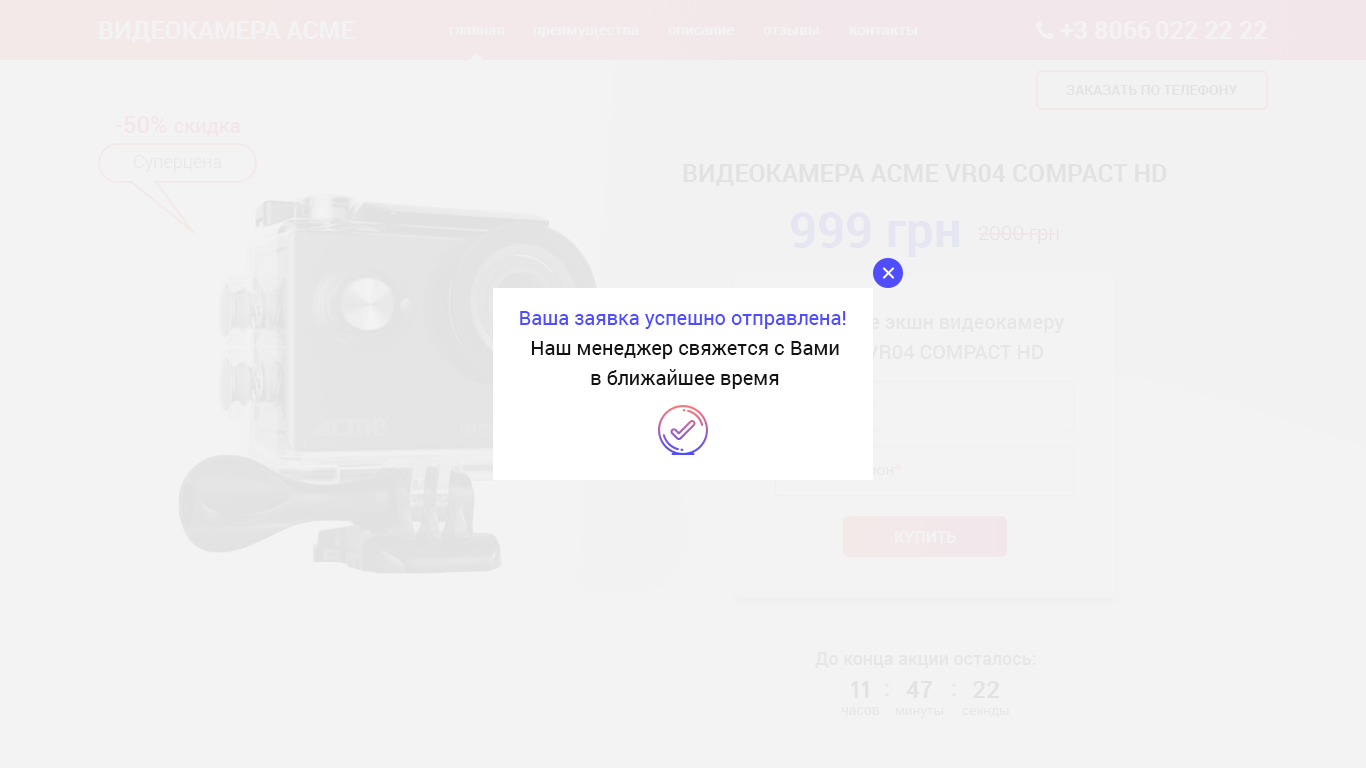
<style>
.page{position:relative;width:1366px;height:768px;background:#f3f3f3}
.page>*{position:absolute;margin:0}
.t1{font:25px "Roboto-Bold";color:#ffffff;text-transform:uppercase}
.t2{font:15px "Roboto-Bold";color:#ffffff}
.t3{font:14px "Roboto-Bold";color:#e2e2e2;text-transform:uppercase}
.t4{font:20px "Roboto-Medium";color:#f2e6eb}
.t5{font:24px "Roboto-Medium";color:#f2e6eb}
.t6{font:18px "Roboto-Light";color:#e7e7e7}
.t7{font:25px "Roboto-Bold";color:#e2e2e2;text-transform:uppercase}
.t8{font:49px "Roboto-Bold";color:#e6e6f3}
.t9{font:20px "Roboto-Light";color:#e2e2e2}
.t10{font:20px/30px "Roboto-Regular";color:#141414}
.t11{font:20px/30px "Roboto-Regular";color:#4f4dfc}
.t12{font:16px "Roboto-Bold";color:#ffffff;text-transform:uppercase}
.t13{font:18px "Roboto-Medium";color:#e6e6e6}
.t14{font:24px "IstokWeb-Bold";color:#e2e2e2}
.t15{font:24px "IstokWeb-Bold";color:#e7e7e7}
.t16{font:14px "Roboto-Medium";color:#e7e7e7}
.t17{font:14px "IstokWeb-Regular";color:#e7e7e7}
</style>
<div class="page">
<p class="t1" style="left:99px;top:21px;width:256px;height:22px">Видеокамера Acme</p>
<p class="t2" style="left:449px;top:27px;width:56px;height:8px">главная</p>
<p class="t2" style="left:533px;top:27px;width:106px;height:11px">преимущества</p>
<p class="t2" style="left:668px;top:27px;width:66px;height:8px">описание</p>
<p class="t2" style="left:763px;top:27px;width:56px;height:8px">отзывы</p>
<p class="t2" style="left:849px;top:27px;width:69px;height:8px">контакты</p>
<p class="t1" style="left:1060px;top:21px;width:207px;height:18px">+3 8066 022 22 22</p>
<p class="t3" style="left:1066px;top:85px;width:172px;height:10px">Заказать по телефону</p>
<p class="t4" style="left:115px;top:116px;width:125px;height:20px"><span class="t5">-50% </span>скидка</p>
<p class="t6" style="left:134px;top:155px;width:88px;height:17px">Суперцена</p>
<p class="t7" style="left:683px;top:164px;width:484px;height:22px">Видеокамера Acme VR04 Compact HD</p>
<p class="t8" style="left:791px;top:212px;width:168px;height:45px">999 грн</p>
<p class="t9" style="left:979px;top:226px;width:80px;height:18px">2000 грн</p>
<p class="t10" style="left:520px;top:311px;width:326px;height:78px;text-align:center"><span class="t11">Ваша заявка успешно отправлена! <br></span>Наш менеджер свяжется с Вами<br>в ближайшее время</p>
<p class="t12" style="left:895px;top:531px;width:61px;height:12px">купить</p>
<p class="t13" style="left:815px;top:652px;width:221px;height:16px">До конца акции осталось:</p>
<p class="t14" style="left:851px;top:681px;width:18px;height:17px">11</p>
<p class="t15" style="left:885px;top:684px;width:4px;height:12px">:</p>
<p class="t14" style="left:906px;top:681px;width:26px;height:17px">47</p>
<p class="t15" style="left:952px;top:684px;width:4px;height:12px">:</p>
<p class="t14" style="left:973px;top:681px;width:26px;height:17px">22</p>
<p class="t16" style="left:841px;top:707px;width:39px;height:8px">часов</p>
<p class="t17" style="left:895px;top:708px;width:49px;height:10px">минуты</p>
<p class="t17" style="left:962px;top:708px;width:47px;height:9px">секнды</p>
</div>
